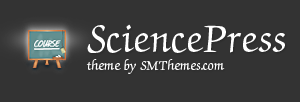
<style>
.page{position:relative;width:300px;height:102px;background:#333333}
.page>*{position:absolute;margin:0}
.t1{font:16px/18px "CyrillicChancellor";color:#ffffff}
.t2{font:48px/24px "CyrillicChancellor";color:#ffffff}
</style>
<div class="page">
<p class="t1" style="left:86px;top:24px;width:199px;height:50px"><span class="t2">SciencePress<br></span>theme by SMThemes.com</p>
</div>
